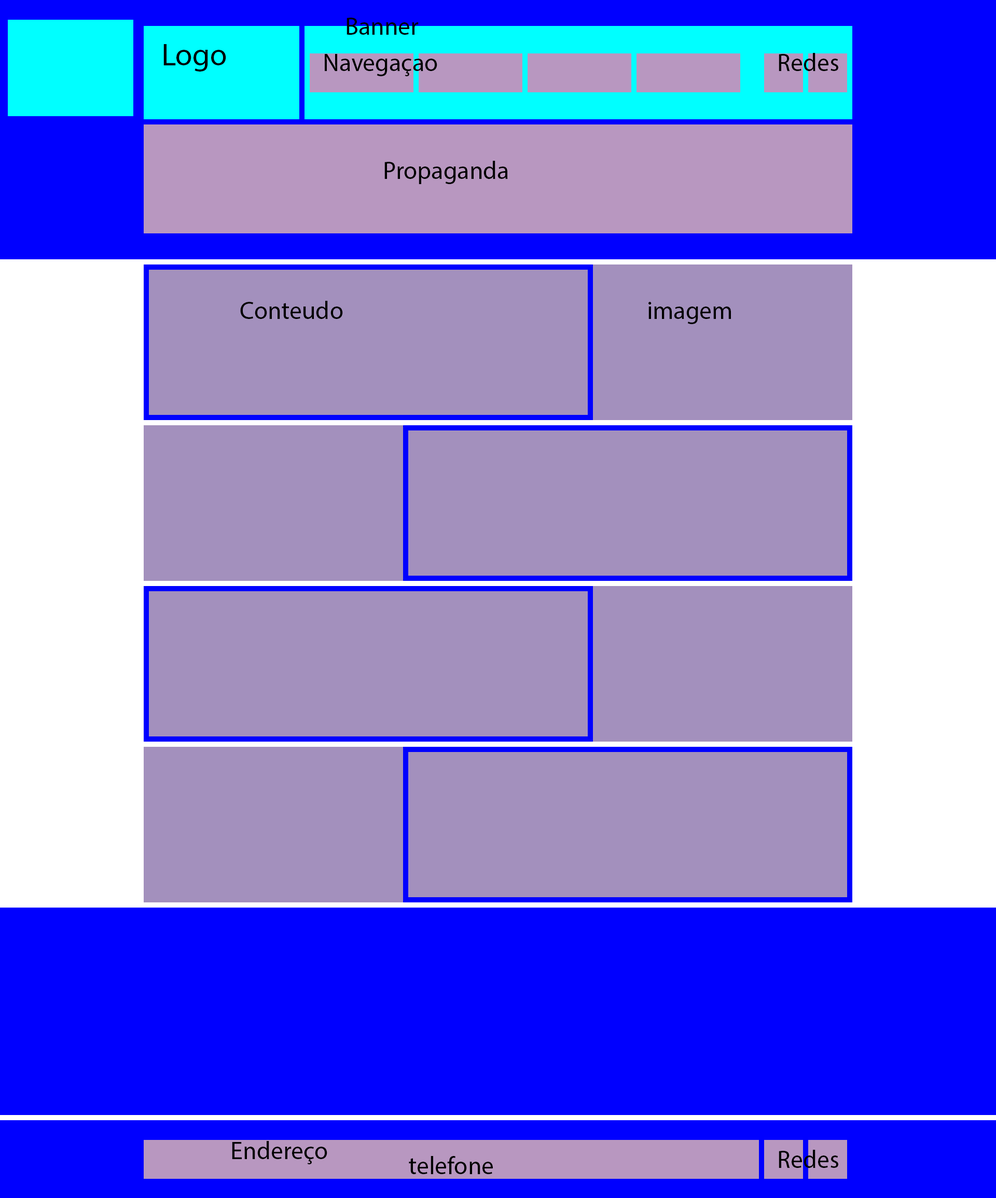
<style>
.page{position:relative;width:996px;height:1198px;background:#a390bd}
.page>*{position:absolute;margin:0}
.t1{font:24.9px "MyriadPro-Regular";color:#000000}
.t2{font:31.1px "MyriadPro-Regular";color:#000000}
</style>
<div class="page">
<p class="t1" style="left:346px;top:18px;width:72px;height:17px">Banner</p>
<p class="t2" style="left:163px;top:44px;width:63px;height:28px">Logo</p>
<p class="t1" style="left:325px;top:54px;width:112px;height:22px">Navegaçao</p>
<p class="t1" style="left:778px;top:53px;width:60px;height:18px">Redes</p>
<p class="t1" style="left:384px;top:161px;width:124px;height:23px">Propaganda</p>
<p class="t1" style="left:240px;top:301px;width:103px;height:18px">Conteudo</p>
<p class="t1" style="left:648px;top:302px;width:83px;height:22px">imagem</p>
<p class="t1" style="left:232px;top:1141px;width:95px;height:23px">Endereço</p>
<p class="t1" style="left:409px;top:1156px;width:84px;height:18px">telefone</p>
<p class="t1" style="left:778px;top:1150px;width:60px;height:18px">Redes</p>
</div>
